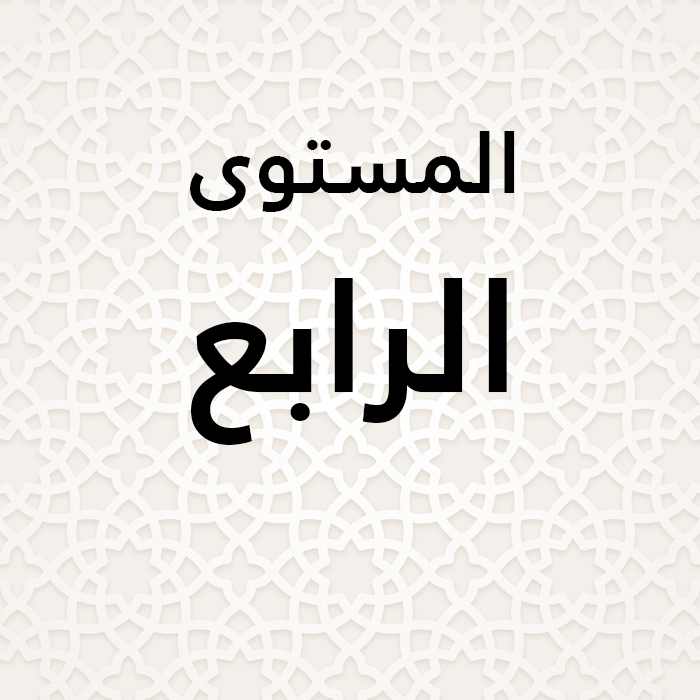
<style>
.page{position:relative;width:700px;height:700px}
.page>*{position:absolute;margin:0}
.t1{font:85.8px/198.8px "AJannatLT-Bold";color:#000000}
.t2{font:159.4px/198.8px "AJannatLT-Bold";color:#000000}
</style>
<div class="page">
<p class="t1" style="left:190px;top:131px;width:325px;height:314px;text-align:center">المستوى<br><span class="t2">الرابع</span></p>
</div>
